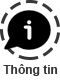
<style>
.page{position:relative;width:60px;height:80px;background:#ffffff}
.page>*{position:absolute;margin:0}
.t1{font:12px "Arial-BoldMT";color:#363636}
</style>
<div class="page">
<p class="t1" style="left:3px;top:64px;width:55px;height:12px">Thông tin</p>
</div>
